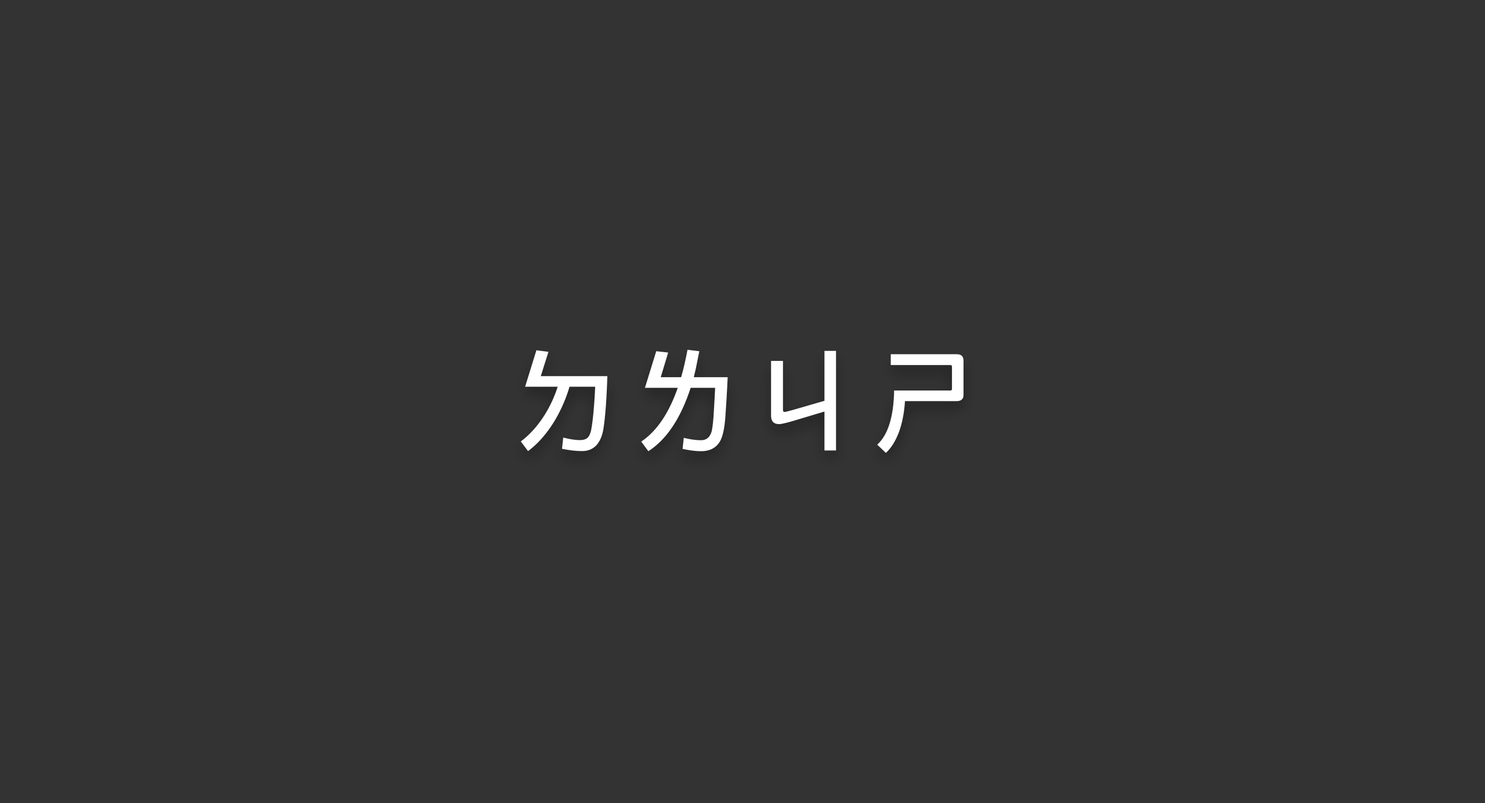
<style>
.page{position:relative;width:1485px;height:803px;background:#333333}
.page>*{position:absolute;margin:0}
.t1{font:119.8px "PingFangHK-Medium";color:#ffffff}
</style>
<div class="page">
<p class="t1" style="left:520px;top:349px;width:444px;height:104px">ㄉㄌㄐㄕ</p>
</div>
